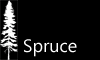
<style>
.page{position:relative;width:100px;height:60px;background:#000000}
.page>*{position:absolute;margin:0}
.t1{font:17.9px "Ebrima";color:#ffffff}
</style>
<div class="page">
<p class="t1" style="left:24px;top:39px;width:53px;height:18px">Spruce</p>
</div>
